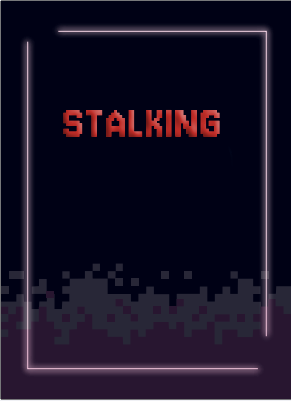
<style>
.page{position:relative;width:291px;height:401px;background:#000115}
.page>*{position:absolute;margin:0}
.t1{font:50px "Jersey10-Regular";letter-spacing:0.025em}
</style>
<div class="page">
<p class="t1" style="left:63px;top:109px;width:157px;height:28px">STALKING</p>
</div>
